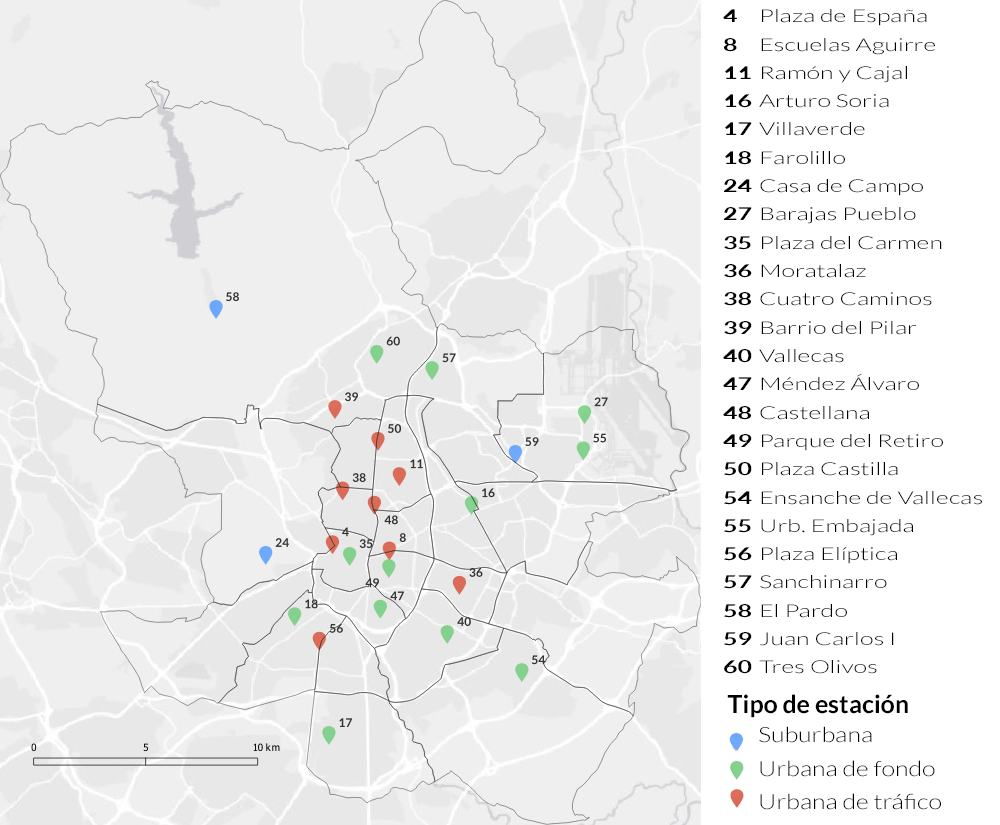
<style>
.page{position:relative;width:1000px;height:825px;background:#efefef}
.page>*{position:absolute;margin:0}
.t1{font:17.7px/28.3px "Lato-Light";color:#000000;scale:1.41 1}
.t2{font:17.7px/28.3px "Lato-Bold";color:#000000;scale:1.41 1}
.t3{font:25px "Lato-Bold";color:#000000}
.t4{font:21px/33.6px "Lato-Light";color:#000000;scale:1.19 1}
</style>
<div class="page">
<p class="t1" style="left:723px;top:9px;width:259px;height:665px"><span class="t2">4</span> Plaza de España<br><span class="t2">8</span> Escuelas Aguirre<br><span class="t2">11</span> Ramón y Cajal<br><span class="t2">16</span> Arturo Soria<br><span class="t2">17</span> Villaverde<br><span class="t2">18</span> Farolillo<br><span class="t2">24</span> Casa de Campo<br><span class="t2">27</span> Barajas Pueblo<br><span class="t2">35</span> Plaza del Carmen<br><span class="t2">36</span> Moratalaz<br><span class="t2">38</span> Cuatro Caminos<br><span class="t2">39</span> Barrio del Pilar<br><span class="t2">40</span> Vallecas<br><span class="t2">47</span> Méndez Álvaro<br><span class="t2">48</span> Castellana<br><span class="t2">49</span> Parque del Retiro<br><span class="t2">50</span> Plaza Castilla<br><span class="t2">54</span> Ensanche de Vallecas<br><span class="t2">55</span> Urb. Embajada<br><span class="t2">56</span> Plaza Elíptica<br><span class="t2">57</span> Sanchinarro<br><span class="t2">58</span> El Pardo<br><span class="t2">59</span> Juan Carlos I<br><span class="t2">60</span> Tres Olivos</p>
<p class="t3" style="left:727px;top:694px;width:181px;height:24px">Tipo de estación</p>
<p class="t4" style="left:759px;top:726px;width:182px;height:84px">Suburbana<br>Urbana de fondo<br>Urbana de tráfico</p>
</div>
